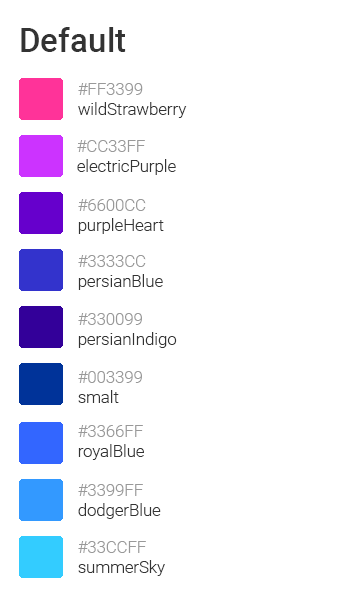
<style>
.page{position:relative;width:350px;height:600px;background:#ffffff}
.page>*{position:absolute;margin:0}
.t1{font:33.3px "Roboto-Medium";color:#333333}
.t2{font:16.7px "Roboto-Light";color:#333333}
.t3{font:16.7px "Roboto-Light";color:#999999}
</style>
<div class="page">
<p class="t1" style="left:21px;top:27px;width:105px;height:25px">Default</p>
<p class="t2" style="left:78px;top:83px;width:109px;height:35px"><span class="t3">#FF3399<br></span>wildStrawberry</p>
<p class="t2" style="left:77px;top:140px;width:99px;height:35px"><span class="t3">#CC33FF<br></span>electricPurple</p>
<p class="t2" style="left:78px;top:199px;width:86px;height:35px"><span class="t3">#6600CC<br></span>purpleHeart</p>
<p class="t2" style="left:78px;top:255px;width:85px;height:35px"><span class="t3">#3333CC<br></span>persianBlue</p>
<p class="t2" style="left:78px;top:313px;width:99px;height:35px"><span class="t3">#330099<br></span>persianIndigo</p>
<p class="t3" style="left:78px;top:371px;width:64px;height:32px">#003399<br><span class="t2">smalt</span></p>
<p class="t2" style="left:78px;top:425px;width:66px;height:35px"><span class="t3">#3366FF<br></span>royalBlue</p>
<p class="t2" style="left:78px;top:484px;width:83px;height:35px"><span class="t3">#3399FF<br></span>dodgerBlue</p>
<p class="t2" style="left:78px;top:541px;width:87px;height:35px"><span class="t3">#33CCFF<br></span>summerSky</p>
</div>
